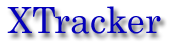
<style>
.page{position:relative;width:196px;height:42px;background:#ffffff}
.page>*{position:absolute;margin:0}
.t1{font:36px "Century";color:#0400bb}
</style>
<div class="page">
<p class="t1" style="left:7px;top:6px;width:154px;height:28px">XTracker</p>
</div>
